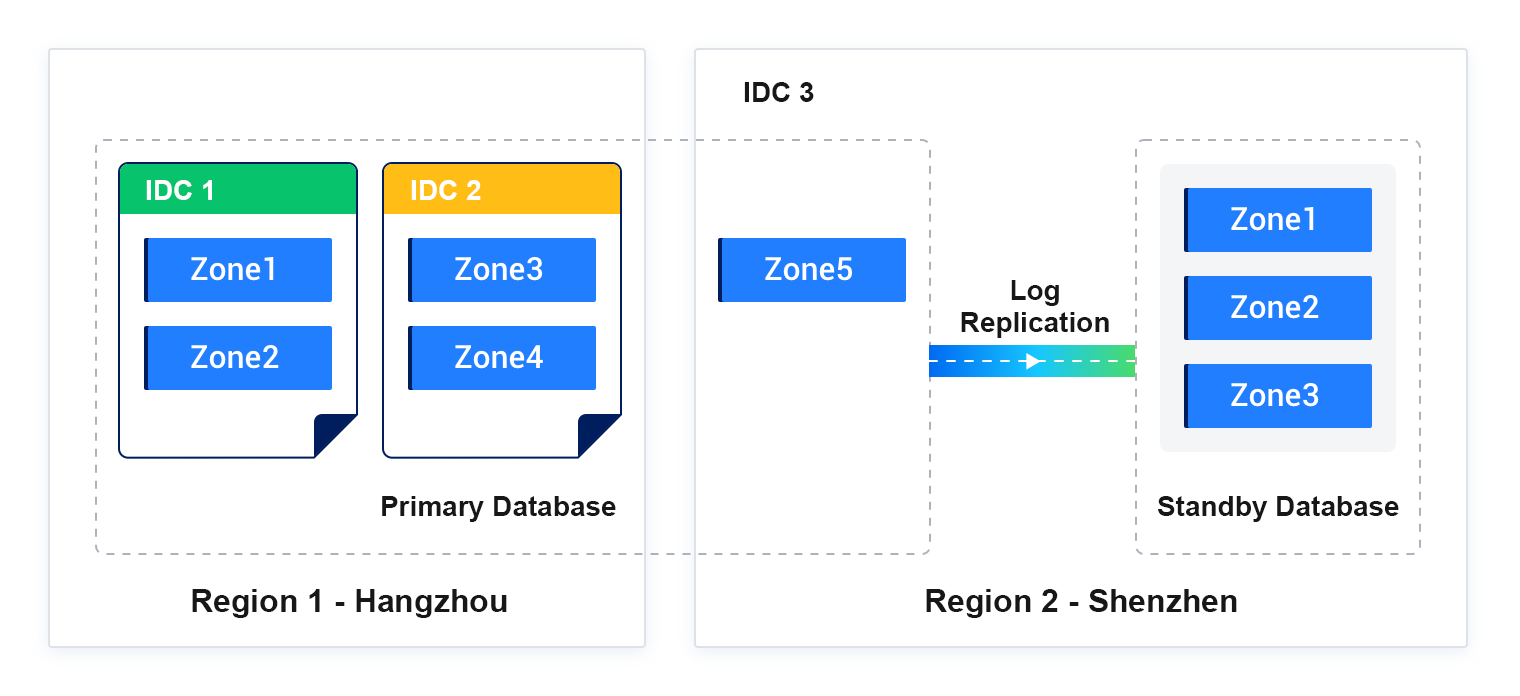
<style>
.page{position:relative;width:1520px;height:696px;background:#ffffff}
.page>*{position:absolute;margin:0}
.t1{font:28px "Arial-BoldMT";color:#171717}
.t2{font:28px "Arial-BoldMT";color:#ffffff}
.t3{font:28px/32px "Arial-BoldMT";color:#171717}
.t4{font:32px "Arial-BoldMT";color:#171717}
</style>
<div class="page">
<p class="t1" style="left:744px;top:82px;width:70px;height:20px">IDC 3</p>
<p class="t2" style="left:146px;top:180px;width:66px;height:20px">IDC 1</p>
<p class="t2" style="left:411px;top:180px;width:70px;height:20px">IDC 2</p>
<p class="t3" style="left:961px;top:280px;width:148px;height:58px;text-align:center">Log Replication</p>
<p class="t1" style="left:382px;top:496px;width:234px;height:26px">Primary Database</p>
<p class="t1" style="left:1158px;top:496px;width:241px;height:26px">Standby Database</p>
<p class="t4" style="left:192px;top:589px;width:315px;height:29px">Region 1 - Hangzhou</p>
<p class="t4" style="left:926px;top:589px;width:311px;height:29px">Region 2 - Shenzhen</p>
</div>
